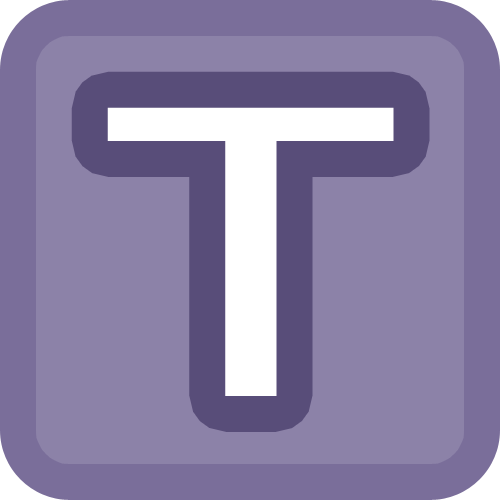
<style>
.page{position:relative;width:500px;height:500px;background:#8c82a8}
.page>*{position:absolute;margin:0}
.t1{font:395px "Menlo-Regular";color:#ffffff;scale:1.3 1}
</style>
<div class="page">
<p class="t1" style="left:107px;top:107px;width:287px;height:289px">T</p>
</div>
